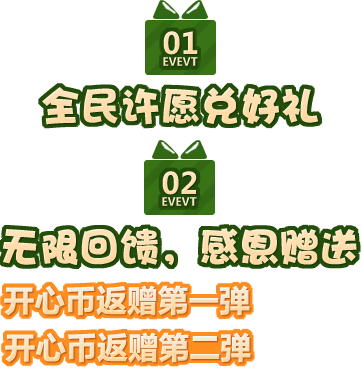
<style>
.page{position:relative;width:362px;height:380px;background:#ffffff}
.page>*{position:absolute;margin:0}
.t1{font:29.5px "MicrosoftYaHei-Bold";color:#fed89f}
.t2{font:10.9px "MicrosoftYaHei-Bold";color:#ffe7c3}
.t3{font:40px "DFPHaiBaoW12";color:#fed89f}
.t4{font:30px "MicrosoftYaHei-Bold";font-weight:bold}
</style>
<div class="page">
<p class="t1" style="left:163px;top:31px;width:35px;height:24px">01</p>
<p class="t2" style="left:163px;top:57px;width:35px;height:9px">EVEVT</p>
<p class="t3" style="left:42px;top:87px;width:277px;height:38px">全民许愿兑好礼</p>
<p class="t1" style="left:162px;top:171px;width:35px;height:24px">02</p>
<p class="t2" style="left:162px;top:197px;width:35px;height:9px">EVEVT</p>
<p class="t3" style="left:3px;top:228px;width:354px;height:38px">无限回馈，感恩赠送</p>
<p class="t4" style="left:4px;top:285px;width:246px;height:31px">开心币返赠第一弹</p>
<p class="t4" style="left:5px;top:332px;width:246px;height:31px">开心币返赠第二弹</p>
</div>
